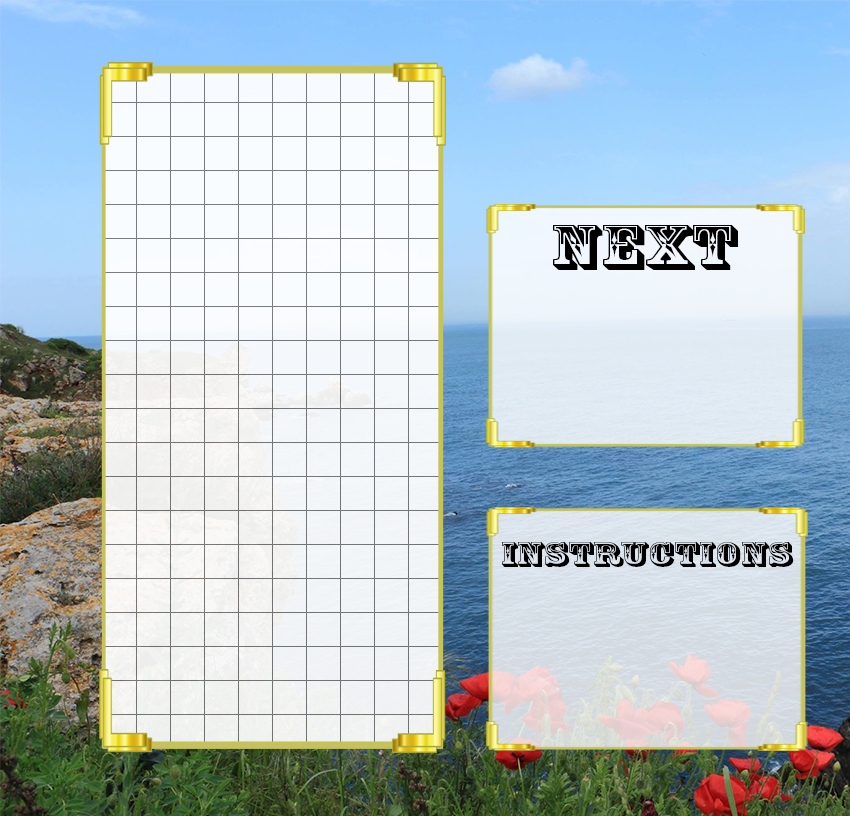
<style>
.page{position:relative;width:850px;height:816px}
.page>*{position:absolute;margin:0}
.t1{font:60px "RosewoodStd-Regular";color:#000000;scale:1.39 1}
.t2{font:33px "RosewoodStd-Regular";color:#000000;scale:1.39 1}
</style>
<div class="page">
<p class="t1" style="left:553px;top:225px;width:185px;height:45px">NEXT</p>
<p class="t2" style="left:502px;top:542px;width:292px;height:25px">INSTRUCTIONS</p>
</div>
